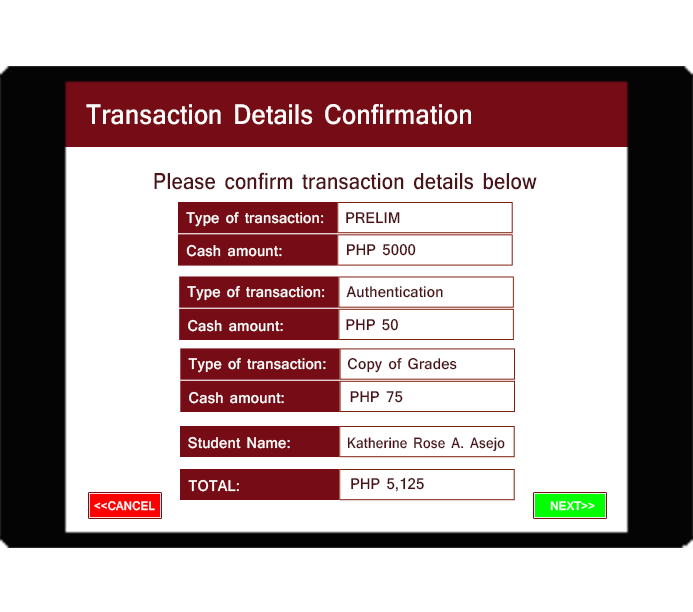
<style>
.page{position:relative;width:693px;height:612px;background:#ffffff}
.page>*{position:absolute;margin:0}
.t1{font:29.9px "Shruti-Bold";letter-spacing:0.01em;color:#fffcfb;scale:0.89 1}
.t2{font:24.2px "Shruti-Bold";letter-spacing:0.01em;color:#4c1419;scale:0.88 1}
.t3{font:16.2px "Shruti-Bold";letter-spacing:0.01em;color:#fffcfb;scale:0.96 1}
.t4{font:16.2px "Shruti-Bold";letter-spacing:0.01em;color:#4c1419;scale:0.96 1}
.t5{font:15.6px "Shruti-Bold";letter-spacing:0.01em;color:#4c1419;scale:0.92 1}
.t6{font:13px "Shruti-Bold";letter-spacing:0.01em;color:#faf7f7;scale:0.95 1}
.t7{font:13px "Shruti-Bold";letter-spacing:0.01em;color:#fcf9f9;scale:0.95 1}
</style>
<div class="page">
<p class="t1" style="left:86px;top:104px;width:385px;height:21px">Transaction Details Confirmation</p>
<p class="t2" style="left:154px;top:172px;width:383px;height:18px">Please confirm transaction details below</p>
<p class="t3" style="left:186px;top:211px;width:138px;height:16px">Type of transaction:</p>
<p class="t4" style="left:346px;top:212px;width:54px;height:12px">PRELIM</p>
<p class="t3" style="left:186px;top:244px;width:96px;height:13px">Cash amount:</p>
<p class="t4" style="left:346px;top:243px;width:70px;height:13px">PHP 5000</p>
<p class="t3" style="left:187px;top:285px;width:138px;height:16px">Type of transaction:</p>
<p class="t4" style="left:346px;top:286px;width:97px;height:12px">Authentication</p>
<p class="t4" style="left:346px;top:318px;width:53px;height:13px">PHP 50</p>
<p class="t3" style="left:188px;top:319px;width:95px;height:13px">Cash amount:</p>
<p class="t3" style="left:188px;top:357px;width:138px;height:16px">Type of transaction:</p>
<p class="t4" style="left:347px;top:357px;width:110px;height:16px">Copy of Grades</p>
<p class="t3" style="left:189px;top:391px;width:95px;height:13px">Cash amount:</p>
<p class="t4" style="left:350px;top:391px;width:53px;height:12px">PHP 75</p>
<p class="t3" style="left:188px;top:436px;width:102px;height:13px">Student Name:</p>
<p class="t5" style="left:347px;top:437px;width:158px;height:15px">Katherine Rose A. Asejo</p>
<p class="t3" style="left:188px;top:479px;width:51px;height:13px">TOTAL:</p>
<p class="t4" style="left:351px;top:477px;width:73px;height:15px">PHP 5,125</p>
<p class="t6" style="left:94px;top:501px;width:61px;height:10px">&lt;&lt;CANCEL</p>
<p class="t7" style="left:550px;top:501px;width:45px;height:10px">NEXT&gt;&gt;</p>
</div>
